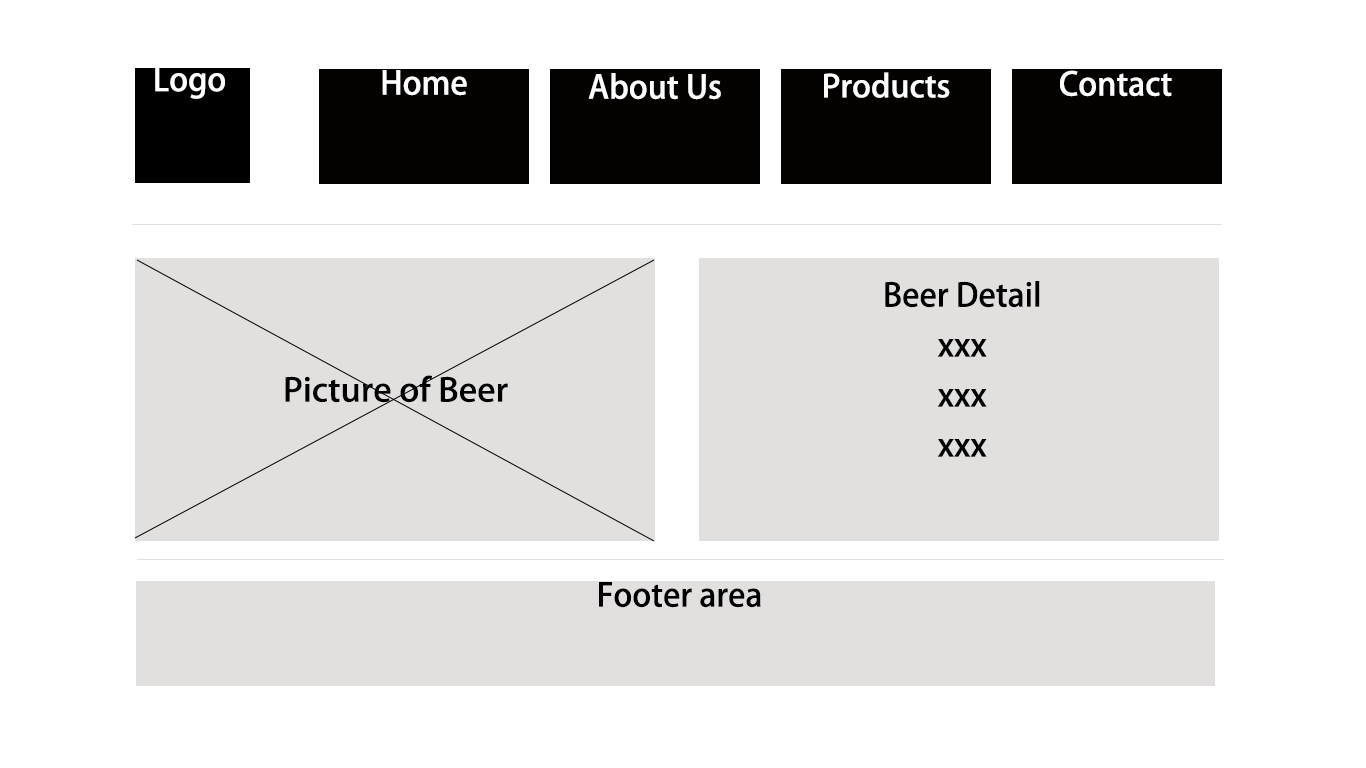
<style>
.page{position:relative;width:1366px;height:768px;background:#ffffff}
.page>*{position:absolute;margin:0}
.t1{font:32px "AdobeHeitiStd-Regular";color:#fffefe}
.t2{font:32px "AdobeHeitiStd-Regular";color:#ffffff}
.t3{font:30.7px "AdobeHeitiStd-Regular";color:#ffffff;scale:1.04 1}
.t4{font:32px/50px "AdobeHeitiStd-Regular";color:#000000}
.t5{font:32px "AdobeHeitiStd-Regular";color:#000000;scale:1.06 1}
.t6{font:32px "AdobeHeitiStd-Regular";color:#000000}
</style>
<div class="page">
<p class="t1" style="left:155px;top:66px;width:70px;height:33px">Logo</p>
<p class="t2" style="left:382px;top:70px;width:85px;height:26px">Home</p>
<p class="t2" style="left:588px;top:73px;width:133px;height:27px">About Us</p>
<p class="t3" style="left:824px;top:72px;width:126px;height:26px">Products</p>
<p class="t2" style="left:1060px;top:70px;width:112px;height:27px">Contact</p>
<p class="t4" style="left:885px;top:281px;width:155px;height:176px;text-align:center">Beer Detail<br>xxx<br>xxx<br>xxx</p>
<p class="t5" style="left:285px;top:375px;width:223px;height:28px">Picture of Beer</p>
<p class="t6" style="left:599px;top:582px;width:162px;height:26px">Footer area</p>
</div>
